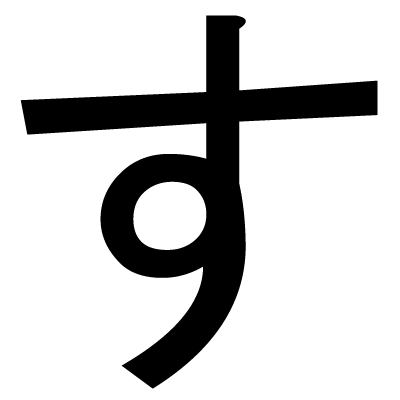
<style>
.page{position:relative;width:400px;height:400px;background:#ffffff}
.page>*{position:absolute;margin:0}
.t1{font:416.7px "MS-PGothic";color:#000000}
</style>
<div class="page">
<p class="t1" style="left:20px;top:15px;width:358px;height:374px">す</p>
</div>
